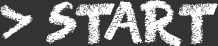
<style>
.page{position:relative;width:218px;height:46px;background:#333333}
.page>*{position:absolute;margin:0}
.t1{font:48px "RightChalk";color:#ffffff}
</style>
<div class="page">
<p class="t1" style="left:0px;top:0px;width:218px;height:48px">&gt; START</p>
</div>
